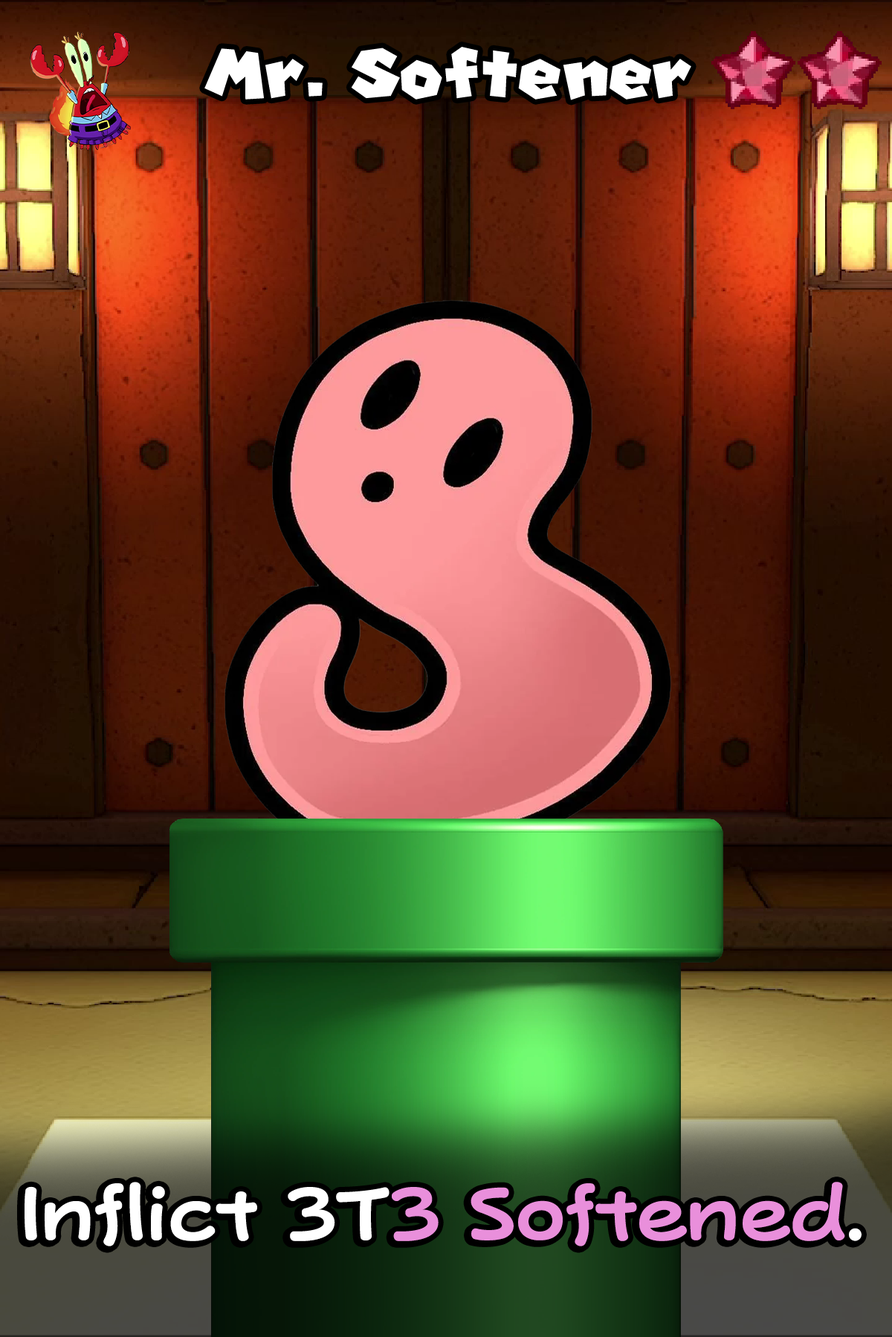
<style>
.page{position:relative;width:892px;height:1337px}
.page>*{position:absolute;margin:0}
.t1{font:159.7px "SuperMario";color:#ffffff}
.t2{font:74.3px "PopJoyStd-B";color:#ffffff}
.t3{font:74.3px "PopJoyStd-B";color:#e98fdb}
</style>
<div class="page">
<p class="t1" style="left:204px;top:47px;width:487px;height:53px">Mr. Softener</p>
<p class="t2" style="left:25px;top:1182px;width:836px;height:65px">Inflict 3T<span class="t3">3 Softened</span>.</p>
</div>
